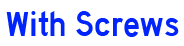
<style>
.page{position:relative;width:184px;height:46px;background:#ffffff}
.page>*{position:absolute;margin:0}
.t1{font:36px "HighwayGothic";color:#0124fb}
</style>
<div class="page">
<p class="t1" style="left:6px;top:11px;width:173px;height:26px">With Screws</p>
</div>
